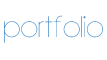
<style>
.page{position:relative;width:107px;height:60px;background:#ffffff}
.page>*{position:absolute;margin:0}
.t1{font:20.8px "BondoluoPeek";color:#438bc9}
</style>
<div class="page">
<p class="t1" style="left:4px;top:15px;width:99px;height:28px">Portfolio</p>
</div>
